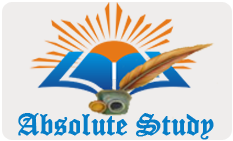
<style>
.page{position:relative;width:233px;height:141px;background:#efedec}
.page>*{position:absolute;margin:0}
.t1{font:30px "OldEnglishTextMT";letter-spacing:-0.01em;color:#067dc7;font-weight:bold}
</style>
<div class="page">
<p class="t1" style="left:18px;top:113px;width:196px;height:27px">Absolute Study</p>
</div>
